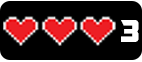
<style>
.page{position:relative;width:142px;height:62px;background:#000000}
.page>*{position:absolute;margin:0}
.t1{font:27.2px "Transformers";color:#ffffff;scale:1.06 1}
</style>
<div class="page">
<p class="t1" style="left:121px;top:20px;width:18px;height:22px">3</p>
</div>
